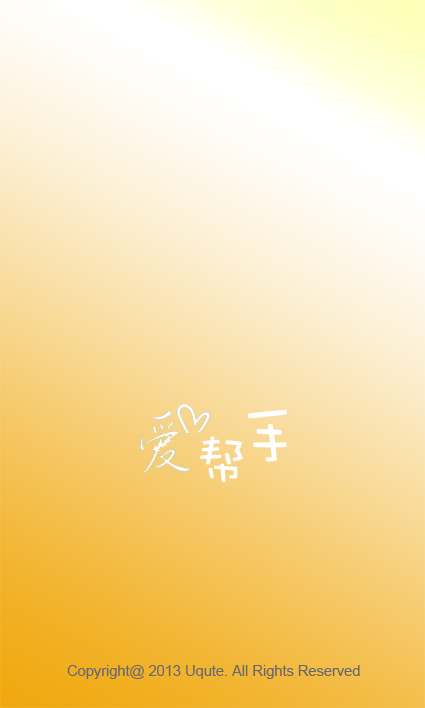
<style>
.page{position:relative;width:425px;height:708px}
.page>*{position:absolute;margin:0}
.t1{font:66.8px "DFPWaWaW5";color:#ffffff}
.t2{font:55.2px "DFPWaWaW5";color:#ffffff}
.t3{font:14.6px "ArialMT";color:#67696b}
</style>
<div class="page">
<p class="t1" style="left:248px;top:409px;width:39px;height:53px">手</p>
<p class="t2" style="left:200px;top:436px;width:43px;height:46px">帮</p>
<p class="t3" style="left:67px;top:665px;width:293px;height:14px">Copyright@ 2013 Uqute. All Rights Reserved</p>
</div>
